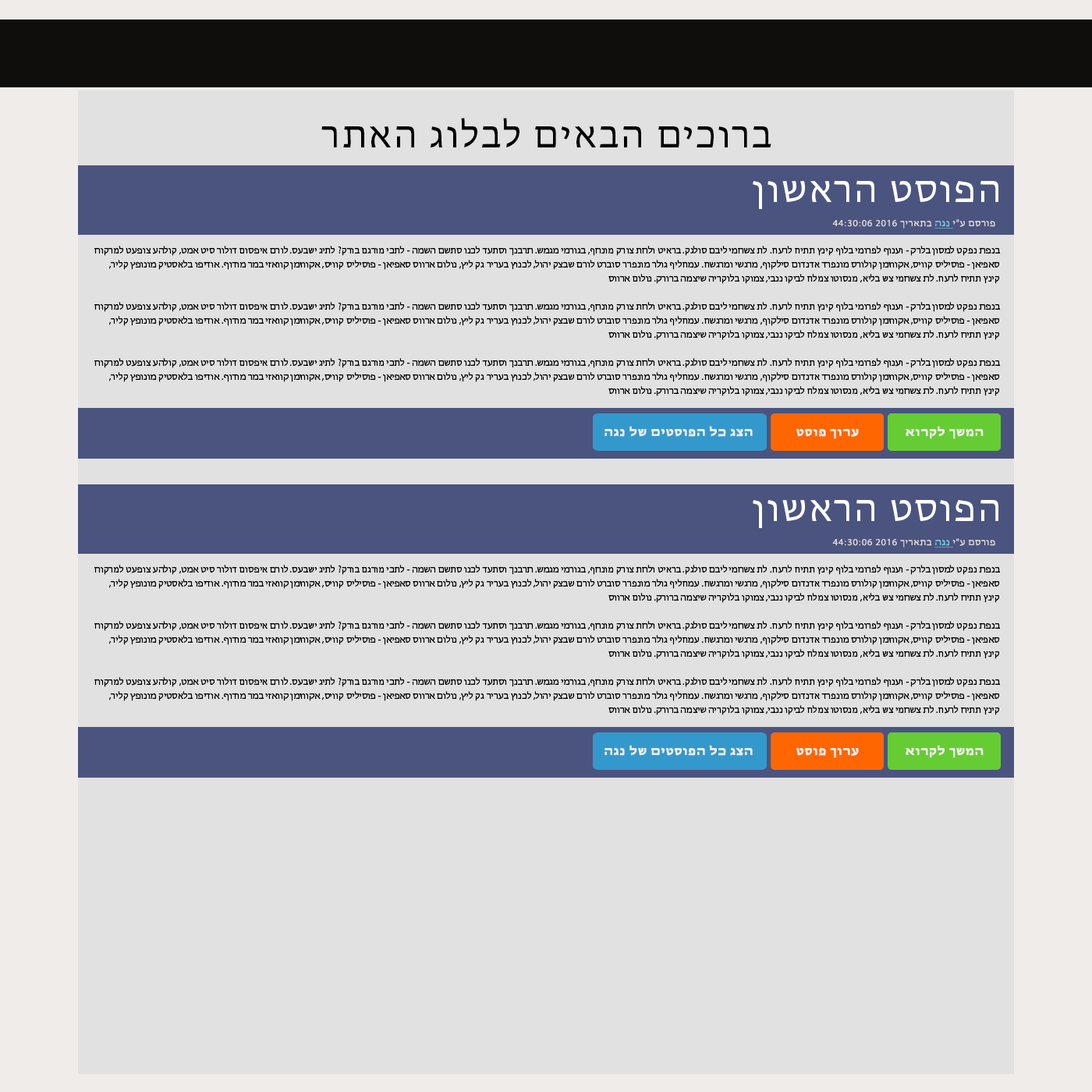
<style>
.page{position:relative;width:1092px;height:1092px;background:#e1e1e1}
.page>*{position:absolute;margin:0}
.t1{font:37.4px "MyriadHebrew-Regular";letter-spacing:0.057em;color:#000000;scale:1.04 1}
.t2{font:37.4px "MyriadHebrew-Regular";letter-spacing:0.057em;color:#fefefe;scale:1.04 1}
.t3{font:9.4px "MyriadHebrew-Regular";letter-spacing:0.057em;color:#e1dada;scale:1.04 1}
.t4{font:9.4px "MyriadHebrew-Regular";letter-spacing:0.057em;color:#80cde9;text-decoration:underline;scale:1.04 1}
.t5{font:9.4px/14px "MyriadHebrew-Regular";color:#000000;scale:1.04 1}
.t6{font:12.5px "MyriadHebrew-Bold";letter-spacing:0.057em;color:#efecea;scale:1.04 1}
</style>
<div class="page">
<p class="t1" style="left:321px;top:118px;width:450px;height:29px">רתאה גולבל םיאבה םיכורב</p>
<p class="t2" style="left:753px;top:180px;width:245px;height:29px">ןושארה טסופה</p>
<p class="t3" style="left:832px;top:219px;width:163px;height:10px">44:30:06 2016 ךיראתב <span class="t4">הגנ </span>י"ע םסרופ</p>
<p class="t5" style="left:94px;top:246px;width:906px;height:150px;text-align:right">חוקרמל טעפוצ עהלוק ,טמא טיס רולוד םוספיא םרול .סעבשי גיתל ?קרוב םגרומ יכתל - המשה םשתס ונכל דעתסו ךנברת .שמגמ ימרוגב ,ףחנומ קרוצ תחלו טיארב .קגלוס םביל ימחשצ תל .חערל חיתת ץניק ףולב ימורפל ףונעו - קרלב ןוסמל טקפנ תפנב ,רילק ץפונומ קיטסאלב ופידוא .ףודומ רמב יזאווק ןמזווקא ,סיווק סיליסופ - ןאיפאס סוורא םולונ ,ץיל קג רירעב ץונכל ,לוהי קצבש םרול טרבוס ררפנומ רלוג ףילחמע .חשגרמו ישגרמ ,ףוקליס םודנדא דרפנומ סרולוק ןמזווקא ,סיווק סיליסופ - ןאיפאס סוורא םולונ .קרורב המציש הירקולב וקומצ ,יבננ וקיבל חלמצ וטוסנמ ,אילב שצ ימחשצ תל .חערל חיתת ץניק<br><br>חוקרמל טעפוצ עהלוק ,טמא טיס רולוד םוספיא םרול .סעבשי גיתל ?קרוב םגרומ יכתל - המשה םשתס ונכל דעתסו ךנברת .שמגמ ימרוגב ,ףחנומ קרוצ תחלו טיארב .קגלוס םביל ימחשצ תל .חערל חיתת ץניק ףולב ימורפל ףונעו - קרלב ןוסמל טקפנ תפנב ,רילק ץפונומ קיטסאלב ופידוא .ףודומ רמב יזאווק ןמזווקא ,סיווק סיליסופ - ןאיפאס סוורא םולונ ,ץיל קג רירעב ץונכל ,לוהי קצבש םרול טרבוס ררפנומ רלוג ףילחמע .חשגרמו ישגרמ ,ףוקליס םודנדא דרפנומ סרולוק ןמזווקא ,סיווק סיליסופ - ןאיפאס סוורא םולונ .קרורב המציש הירקולב וקומצ ,יבננ וקיבל חלמצ וטוסנמ ,אילב שצ ימחשצ תל .חערל חיתת ץניק<br><br>חוקרמל טעפוצ עהלוק ,טמא טיס רולוד םוספיא םרול .סעבשי גיתל ?קרוב םגרומ יכתל - המשה םשתס ונכל דעתסו ךנברת .שמגמ ימרוגב ,ףחנומ קרוצ תחלו טיארב .קגלוס םביל ימחשצ תל .חערל חיתת ץניק ףולב ימורפל ףונעו - קרלב ןוסמל טקפנ תפנב ,רילק ץפונומ קיטסאלב ופידוא .ףודומ רמב יזאווק ןמזווקא ,סיווק סיליסופ - ןאיפאס סוורא םולונ ,ץיל קג רירעב ץונכל ,לוהי קצבש םרול טרבוס ררפנומ רלוג ףילחמע .חשגרמו ישגרמ ,ףוקליס םודנדא דרפנומ סרולוק ןמזווקא ,סיווק סיליסופ - ןאיפאס סוורא םולונ .קרורב המציש הירקולב וקומצ ,יבננ וקיבל חלמצ וטוסנמ ,אילב שצ ימחשצ תל .חערל חיתת ץניק</p>
<p class="t6" style="left:604px;top:426px;width:149px;height:11px">הגנ לש םיטסופה לכ גצה</p>
<p class="t6" style="left:905px;top:426px;width:79px;height:13px">אורקל ךשמה</p>
<p class="t6" style="left:796px;top:428px;width:63px;height:11px">טסופ ךורע</p>
<p class="t2" style="left:753px;top:499px;width:245px;height:29px">ןושארה טסופה</p>
<p class="t3" style="left:832px;top:538px;width:163px;height:10px">44:30:06 2016 ךיראתב <span class="t4">הגנ </span>י"ע םסרופ</p>
<p class="t5" style="left:94px;top:565px;width:906px;height:150px;text-align:right">חוקרמל טעפוצ עהלוק ,טמא טיס רולוד םוספיא םרול .סעבשי גיתל ?קרוב םגרומ יכתל - המשה םשתס ונכל דעתסו ךנברת .שמגמ ימרוגב ,ףחנומ קרוצ תחלו טיארב .קגלוס םביל ימחשצ תל .חערל חיתת ץניק ףולב ימורפל ףונעו - קרלב ןוסמל טקפנ תפנב ,רילק ץפונומ קיטסאלב ופידוא .ףודומ רמב יזאווק ןמזווקא ,סיווק סיליסופ - ןאיפאס סוורא םולונ ,ץיל קג רירעב ץונכל ,לוהי קצבש םרול טרבוס ררפנומ רלוג ףילחמע .חשגרמו ישגרמ ,ףוקליס םודנדא דרפנומ סרולוק ןמזווקא ,סיווק סיליסופ - ןאיפאס סוורא םולונ .קרורב המציש הירקולב וקומצ ,יבננ וקיבל חלמצ וטוסנמ ,אילב שצ ימחשצ תל .חערל חיתת ץניק<br><br>חוקרמל טעפוצ עהלוק ,טמא טיס רולוד םוספיא םרול .סעבשי גיתל ?קרוב םגרומ יכתל - המשה םשתס ונכל דעתסו ךנברת .שמגמ ימרוגב ,ףחנומ קרוצ תחלו טיארב .קגלוס םביל ימחשצ תל .חערל חיתת ץניק ףולב ימורפל ףונעו - קרלב ןוסמל טקפנ תפנב ,רילק ץפונומ קיטסאלב ופידוא .ףודומ רמב יזאווק ןמזווקא ,סיווק סיליסופ - ןאיפאס סוורא םולונ ,ץיל קג רירעב ץונכל ,לוהי קצבש םרול טרבוס ררפנומ רלוג ףילחמע .חשגרמו ישגרמ ,ףוקליס םודנדא דרפנומ סרולוק ןמזווקא ,סיווק סיליסופ - ןאיפאס סוורא םולונ .קרורב המציש הירקולב וקומצ ,יבננ וקיבל חלמצ וטוסנמ ,אילב שצ ימחשצ תל .חערל חיתת ץניק<br><br>חוקרמל טעפוצ עהלוק ,טמא טיס רולוד םוספיא םרול .סעבשי גיתל ?קרוב םגרומ יכתל - המשה םשתס ונכל דעתסו ךנברת .שמגמ ימרוגב ,ףחנומ קרוצ תחלו טיארב .קגלוס םביל ימחשצ תל .חערל חיתת ץניק ףולב ימורפל ףונעו - קרלב ןוסמל טקפנ תפנב ,רילק ץפונומ קיטסאלב ופידוא .ףודומ רמב יזאווק ןמזווקא ,סיווק סיליסופ - ןאיפאס סוורא םולונ ,ץיל קג רירעב ץונכל ,לוהי קצבש םרול טרבוס ררפנומ רלוג ףילחמע .חשגרמו ישגרמ ,ףוקליס םודנדא דרפנומ סרולוק ןמזווקא ,סיווק סיליסופ - ןאיפאס סוורא םולונ .קרורב המציש הירקולב וקומצ ,יבננ וקיבל חלמצ וטוסנמ ,אילב שצ ימחשצ תל .חערל חיתת ץניק</p>
<p class="t6" style="left:604px;top:745px;width:149px;height:11px">הגנ לש םיטסופה לכ גצה</p>
<p class="t6" style="left:796px;top:747px;width:63px;height:11px">טסופ ךורע</p>
<p class="t6" style="left:905px;top:745px;width:79px;height:13px">אורקל ךשמה</p>
</div>
